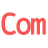
<style>
.page{position:relative;width:48px;height:48px;background:#ffffff}
.page>*{position:absolute;margin:0}
.t1{font:30px "AndaleMono";letter-spacing:-0.12em;color:#fa5555;font-weight:bold;scale:0.97 1}
</style>
<div class="page">
<p class="t1" style="left:1px;top:12px;width:45px;height:23px">Com</p>
</div>
